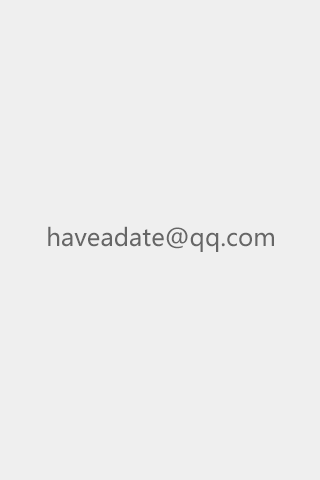
<style>
.page{position:relative;width:320px;height:480px;background:#efefef}
.page>*{position:absolute;margin:0}
.t1{font:24px "MicrosoftYaHei";color:#666666}
</style>
<div class="page">
<p class="t1" style="left:48px;top:226px;width:226px;height:26px">haveadate@qq.com</p>
</div>
